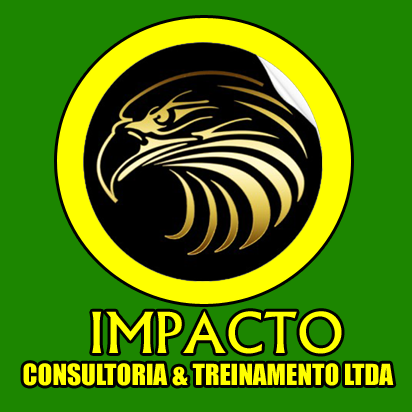
<style>
.page{position:relative;width:412px;height:412px;background:#1c8600}
.page>*{position:absolute;margin:0}
.t1{font:60px "Narkisim";color:#ffff00}
.t2{font:27px "Impact";color:#ffff00}
</style>
<div class="page">
<p class="t1" style="left:92px;top:311px;width:250px;height:43px">IMPACTO</p>
<p class="t2" style="left:23px;top:363px;width:371px;height:23px">CONSULTORIA &amp; TREINAMENTO LTDA</p>
</div>
